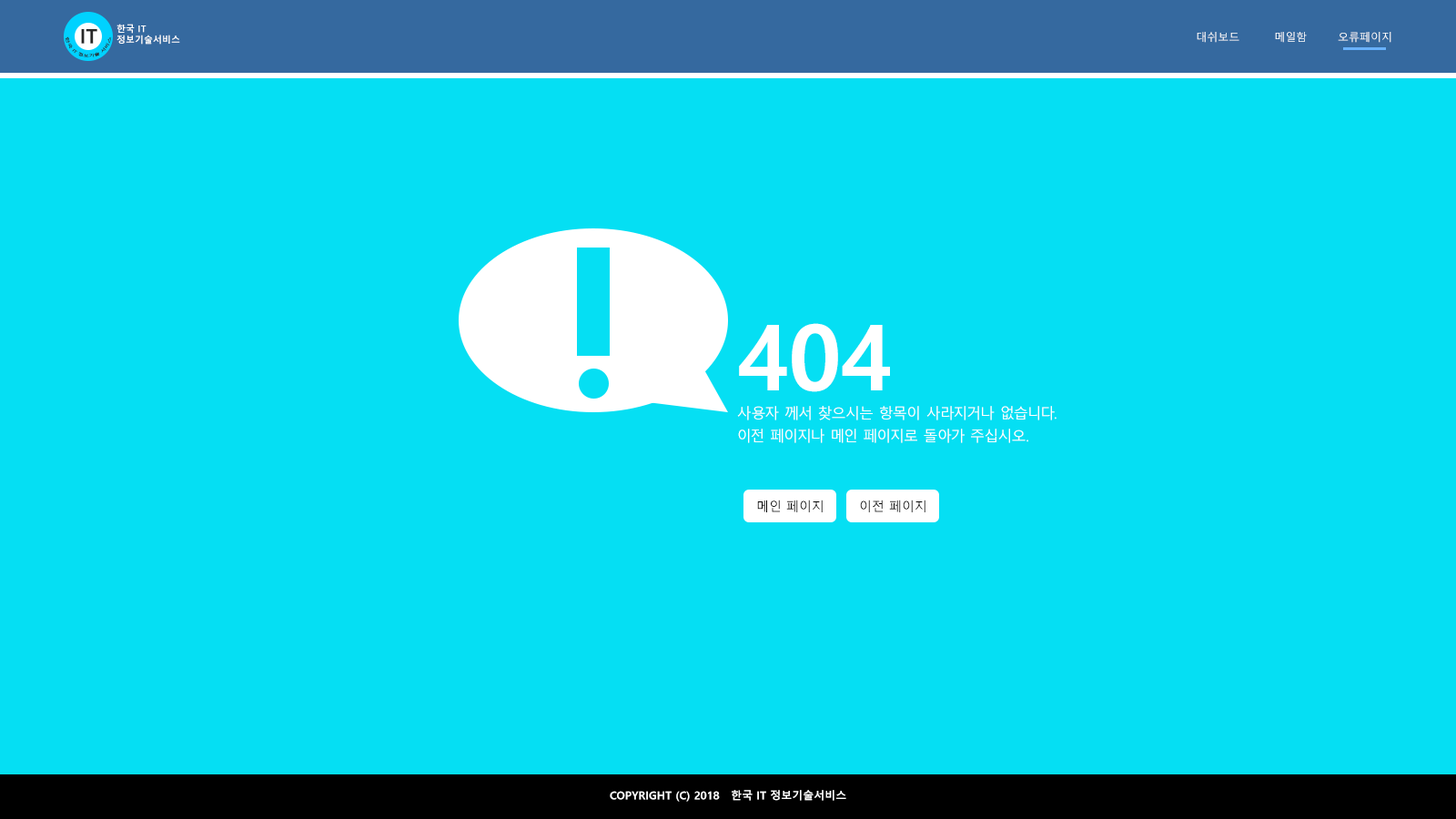
<style>
.page{position:relative;width:1456px;height:819px;background:#05dff3}
.page>*{position:absolute;margin:0}
.t1{font:20px "MalgunGothicBold";color:#282828}
.t2{font:9.1px "MalgunGothicBold";color:#ffffff}
.t3{font:3.6px "MalgunGothic";color:#282828}
.t4{font:10.9px "MalgunGothic";color:#ffffff}
.t5{font:14.6px/28.2px "MalgunGothic";color:#ffffff}
.t6{font:91px/22.7px "MalgunGothicBold";color:#ffffff}
.t7{font:14.6px/22.7px "MalgunGothic";color:#ffffff}
.t8{font:12.7px "MalgunGothic";color:#000000}
.t9{font:10.9px "MalgunGothicBold";color:#ffffff}
</style>
<div class="page">
<p class="t1" style="left:81px;top:29px;width:16px;height:15px">IT</p>
<p class="t2" style="left:116px;top:24px;width:64px;height:21px">한국 IT<br>정보기술서비스</p>
<p class="t3" style="left:65px;top:36px;width:47px;height:21px;text-align:center">한국 IT 정보기술 서비스</p>
<p class="t4" style="left:1197px;top:32px;width:194px;height:11px">대쉬보드         메일함        오류페이지</p>
<p class="t5" style="left:737px;top:323px;width:319px;height:120px"><span class="t6">404<br></span>사용자 께서 찾으시는 항목이 사라지거나 없습니다.<br><span class="t7">이전 페이지나 메인 페이지로 돌아가 주십시오.</span></p>
<p class="t8" style="left:757px;top:500px;width:66px;height:12px">메인 페이지</p>
<p class="t8" style="left:860px;top:500px;width:65px;height:12px">이전 페이지</p>
<p class="t9" style="left:610px;top:790px;width:236px;height:12px">COPYRIGHT (C) 2018   한국 IT 정보기술서비스</p>
</div>
